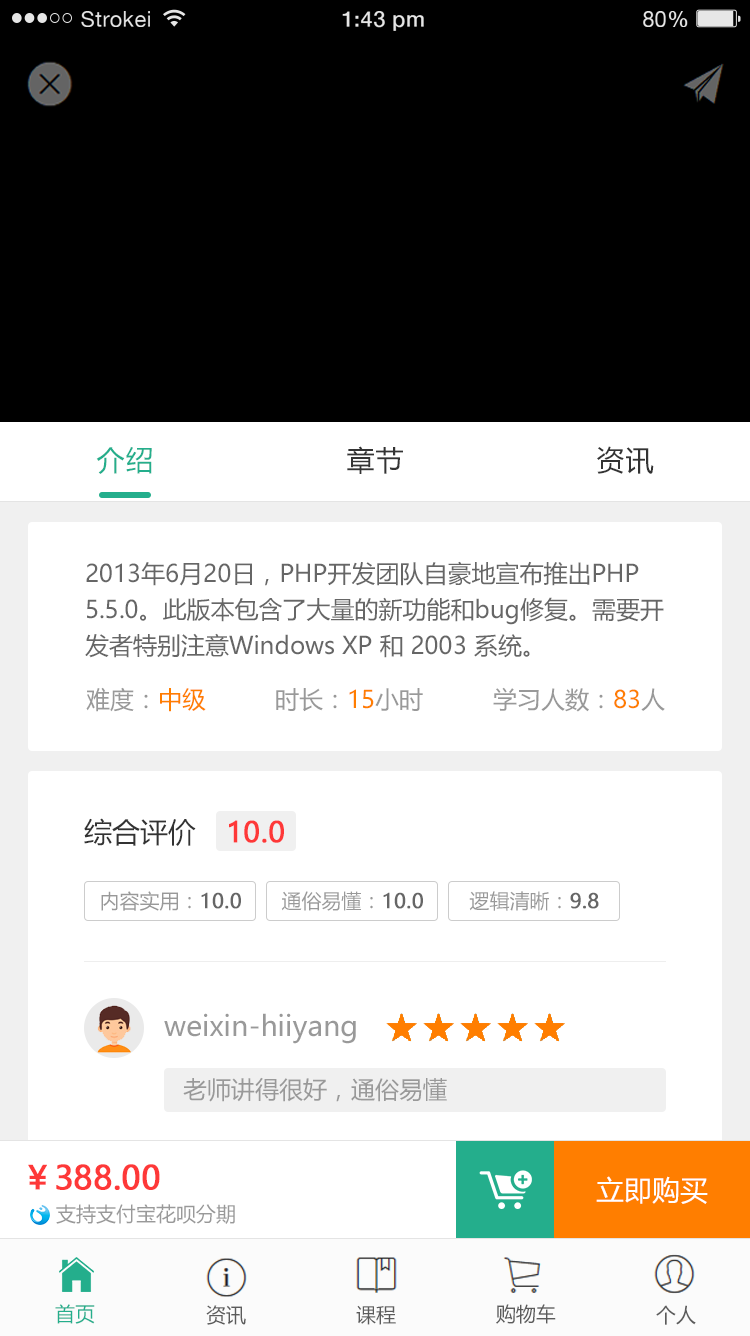
<style>
.page{position:relative;width:750px;height:1336px;background:#ffffff}
.page>*{position:absolute;margin:0}
.t1{font:21.8px "HelveticaNeue";letter-spacing:0.02em;color:#e6e6e6}
.t2{font:21.8px "HelveticaNeue-Medium";letter-spacing:0.02em;color:#e6e6e6}
.t3{font:28px "MicrosoftYaHei";letter-spacing:0.05em;color:#24ae8c}
.t4{font:28px "MicrosoftYaHei";letter-spacing:0.05em;color:#333333}
.t5{font:24px/36px "MicrosoftYaHei";color:#666666}
.t6{font:24px "MicrosoftYaHei";color:#999999}
.t7{font:24px "MicrosoftYaHei";color:#ff7e00}
.t8{font:28px "MicrosoftYaHei";color:#333333}
.t9{font:28px "MicrosoftYaHei";color:#fe3838;font-weight:bold}
.t10{font:20px "MicrosoftYaHei";color:#999999}
.t11{font:20px "MicrosoftYaHei";color:#666666;font-weight:bold}
.t12{font:28px "MicrosoftYaHei";color:#999999}
.t13{font:32px "MicrosoftYaHei";color:#fe3838;font-weight:bold}
.t14{font:28px "MicrosoftYaHei";color:#ffffff}
.t15{font:20px "MicrosoftYaHei";color:#24ae8c}
.t16{font:20px "MicrosoftYaHei";color:#5b5b5b}
</style>
<div class="page">
<p class="t1" style="left:81px;top:11px;width:69px;height:16px">Strokei</p>
<p class="t2" style="left:342px;top:11px;width:82px;height:20px">1:43 pm</p>
<p class="t1" style="left:643px;top:11px;width:45px;height:16px">80<span class="t2">%</span></p>
<p class="t3" style="left:96px;top:447px;width:56px;height:27px">介绍</p>
<p class="t4" style="left:347px;top:446px;width:56px;height:28px">章节</p>
<p class="t4" style="left:597px;top:446px;width:57px;height:28px">资讯</p>
<p class="t5" style="left:85px;top:561px;width:579px;height:97px">2013年6月20日，PHP开发团队自豪地宣布推出PHP 5.5.0。此版本包含了大量的新功能和bug修复。需要开发者特别注意Windows XP 和 2003 系统。</p>
<p class="t6" style="left:86px;top:687px;width:120px;height:25px">难度：<span class="t7">中级</span></p>
<p class="t6" style="left:276px;top:688px;width:147px;height:24px">时长：<span class="t7">15</span>小时</p>
<p class="t6" style="left:493px;top:687px;width:172px;height:25px">学习人数：<span class="t7">83</span>人</p>
<p class="t8" style="left:84px;top:818px;width:112px;height:28px">综合评价</p>
<p class="t9" style="left:229px;top:820px;width:55px;height:23px">10.0</p>
<p class="t10" style="left:101px;top:891px;width:140px;height:20px">内容实用：<span class="t11">10.0</span></p>
<p class="t10" style="left:281px;top:891px;width:142px;height:20px">通俗易懂：<span class="t11">10.0</span></p>
<p class="t10" style="left:469px;top:891px;width:130px;height:20px">逻辑清晰：<span class="t11">9.8</span></p>
<p class="t12" style="left:164px;top:1013px;width:192px;height:31px">weixin-hiiyang</p>
<p class="t6" style="left:183px;top:1077px;width:264px;height:25px">老师讲得很好，通俗易懂</p>
<p class="t13" style="left:28px;top:1164px;width:132px;height:26px">￥388.00</p>
<p class="t14" style="left:596px;top:1176px;width:112px;height:28px">立即购买</p>
<p class="t10" style="left:56px;top:1204px;width:179px;height:20px">支持支付宝花呗分期</p>
<p class="t15" style="left:55px;top:1304px;width:40px;height:20px">首页</p>
<p class="t16" style="left:206px;top:1305px;width:40px;height:20px">资讯</p>
<p class="t16" style="left:356px;top:1305px;width:40px;height:20px">课程</p>
<p class="t16" style="left:496px;top:1304px;width:60px;height:20px">购物车</p>
<p class="t16" style="left:656px;top:1305px;width:40px;height:20px">个人</p>
</div>
